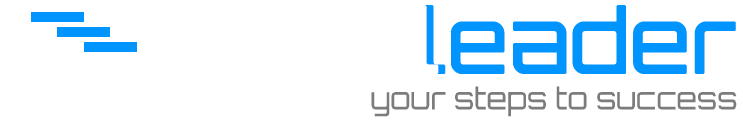
<style>
.page{position:relative;width:743px;height:120px;background:#ffffff}
.page>*{position:absolute;margin:0}
.t1{font:86.3px "Orbitron-Regular";color:#0094ff;font-weight:bold}
.t2{font:29.7px "Orbitron-Regular";color:#7c7c7c}
</style>
<div class="page">
<p class="t1" style="left:424px;top:5px;width:312px;height:69px">leader</p>
<p class="t2" style="left:371px;top:86px;width:366px;height:31px">your steps to success</p>
</div>
